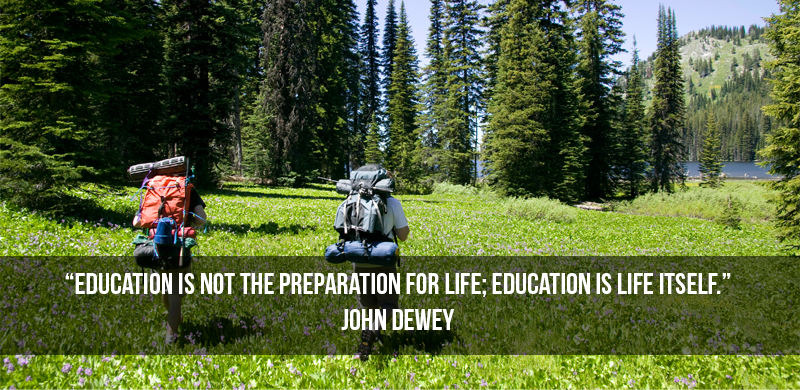
<style>
.page{position:relative;width:800px;height:390px}
.page>*{position:absolute;margin:0}
.t1{font:30px/36px "BebasNeue";color:#ffffff;text-transform:uppercase}
</style>
<div class="page">
<p class="t1" style="left:65px;top:273px;width:666px;height:57px;text-align:center">“Education is not the preparation for life; education is life itself.”<br>John Dewey</p>
</div>
